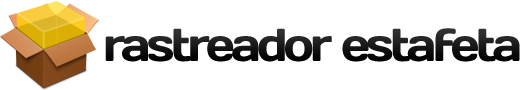
<style>
.page{position:relative;width:525px;height:90px;background:#ffffff}
.page>*{position:absolute;margin:0}
.t1{font:45.8px "Days";letter-spacing:-0.08em;color:#141414}
</style>
<div class="page">
<p class="t1" style="left:105px;top:28px;width:415px;height:34px">rastreador estafeta</p>
</div>
